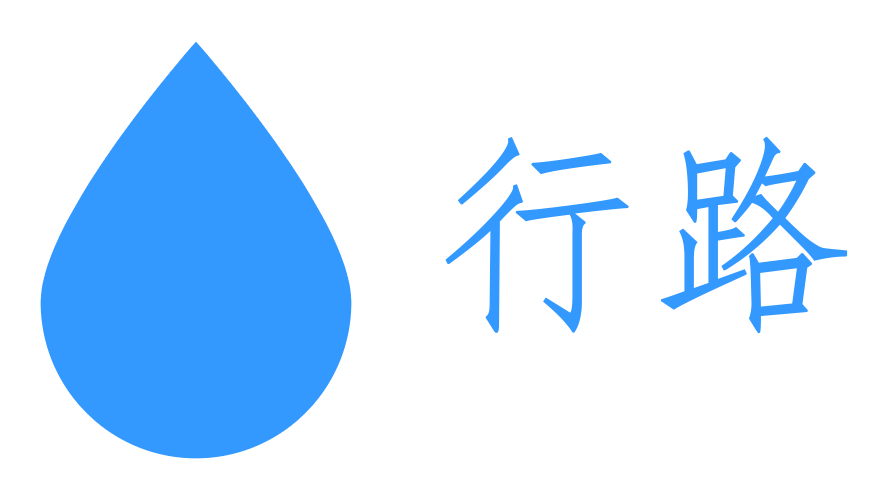
<style>
.page{position:relative;width:894px;height:500px;background:#ffffff}
.page>*{position:absolute;margin:0}
.t1{font:212.3px "FangSong";color:#3399ff;font-weight:bold}
</style>
<div class="page">
<p class="t1" style="left:445px;top:136px;width:403px;height:198px">行路</p>
</div>
